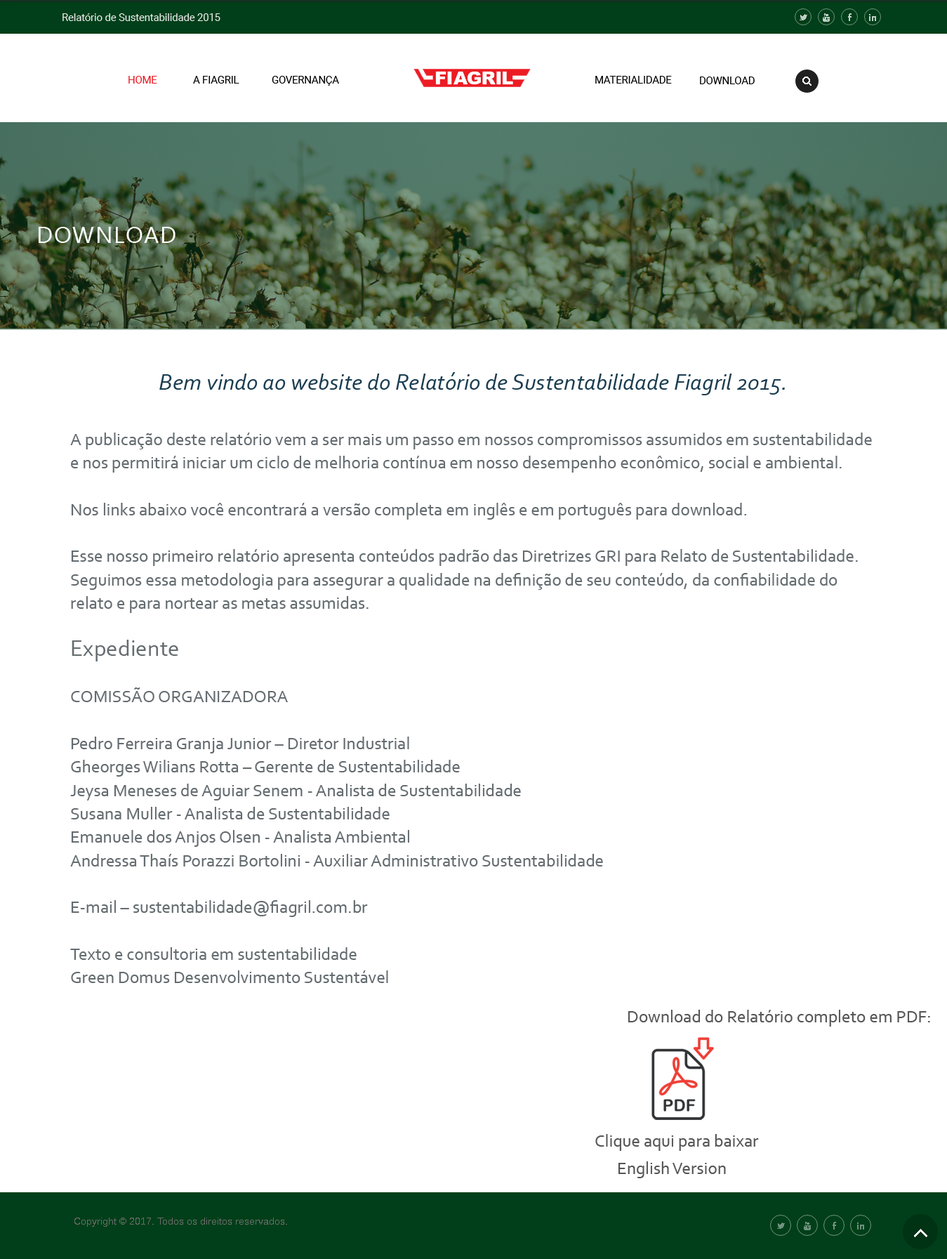
<style>
.page{position:relative;width:947px;height:1259px;background:#ffffff}
.page>*{position:absolute;margin:0}
.t1{font:10.2px "Roboto-Regular";color:#ebebeb}
.t2{font:10.2px "Roboto-Regular";color:#ec1c24}
.t3{font:10.2px "Roboto-Regular";color:#010000}
.t4{font:23.4px "Ebrima";letter-spacing:0.04em;color:#ffffff}
.t5{font:23.4px "Corbel-Italic";color:#1b3d51}
.t6{font:17.6px/23.4px "Corbel";color:#646c70}
.t7{font:23.4px/23.4px "Corbel";color:#646c70}
.t8{font:17.6px "Corbel";color:#565656}
</style>
<div class="page">
<p class="t1" style="left:62px;top:13px;width:158px;height:8px">Relatório de Sustentabilidade 2015</p>
<p class="t2" style="left:128px;top:76px;width:29px;height:8px">HOME</p>
<p class="t3" style="left:193px;top:76px;width:46px;height:8px">A FIAGRIL</p>
<p class="t3" style="left:272px;top:76px;width:67px;height:10px">GOVERNANÇA</p>
<p class="t3" style="left:595px;top:76px;width:77px;height:8px">MATERIALIDADE</p>
<p class="t3" style="left:700px;top:77px;width:55px;height:7px">DOWNLOAD</p>
<p class="t4" style="left:39px;top:227px;width:137px;height:16px">DOWNLOAD</p>
<p class="t5" style="left:159px;top:372px;width:626px;height:23px">Bem vindo ao website do Relatório de Sustentabilidade Fiagril 2015.</p>
<p class="t6" style="left:70px;top:433px;width:802px;height:550px">A publicação deste relatório vem a ser mais um passo em nossos compromissos assumidos em sustentabilidade e nos permitirá iniciar um ciclo de melhoria contínua em nosso desempenho econômico, social e ambiental.<br><br>Nos links abaixo você encontrará a versão completa em inglês e em português para download. <br><br>Esse nosso primeiro relatório apresenta conteúdos padrão das Diretrizes GRI para Relato de Sustentabilidade. <br>Seguimos essa metodologia para assegurar a qualidade na definição de seu conteúdo, da confiabilidade do relato e para nortear as metas assumidas.<br><br><span class="t7">Expediente<br></span><br>COMISSÃO ORGANIZADORA <br><br>Pedro Ferreira Granja Junior – Diretor Industrial<br>Gheorges Wilians Rotta – Gerente de Sustentabilidade<br>Jeysa Meneses de Aguiar Senem - Analista de Sustentabilidade<br>Susana Muller - Analista de Sustentabilidade<br>Emanuele dos Anjos Olsen - Analista Ambiental<br>Andressa Thaís Porazzi Bortolini - Auxiliar Administrativo Sustentabilidade<br><br>E-mail – sustentabilidade@fiagril.com.br<br><br>Texto e consultoria em sustentabilidade <br>Green Domus Desenvolvimento Sustentável</p>
<p class="t8" style="left:628px;top:1010px;width:302px;height:17px">Download do Relatório completo em PDF:</p>
<p class="t8" style="left:595px;top:1134px;width:164px;height:17px">Clique aqui para baixar</p>
<p class="t8" style="left:618px;top:1161px;width:108px;height:17px">English Version</p>
</div>
